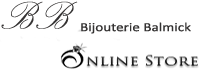
<style>
.page{position:relative;width:199px;height:69px;background:#ffffff}
.page>*{position:absolute;margin:0}
.t1{font:48.1px "PalaceScriptMT";color:#353333}
.t2{font:12.5px "Calibri";color:#343232;scale:1.21 1}
</style>
<div class="page">
<p class="t1" style="left:1px;top:1px;width:77px;height:28px">BB</p>
<p class="t2" style="left:81px;top:22px;width:110px;height:12px">Bijouterie Balmick</p>
</div>
